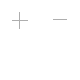
<style>
.page{position:relative;width:80px;height:80px;background:#ffffff}
.page>*{position:absolute;margin:0}
.t1{font:52px "Raleway-Thin";color:#aeaeae}
</style>
<div class="page">
<p class="t1" style="left:12px;top:12px;width:16px;height:17px">+</p>
</div>
